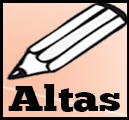
<style>
.page{position:relative;width:129px;height:120px}
.page>*{position:absolute;margin:0}
.t1{font:36.4px "ChunkFiveEx";color:#000000;scale:1.18 1}
</style>
<div class="page">
<p class="t1" style="left:8px;top:84px;width:112px;height:28px">Altas</p>
</div>
